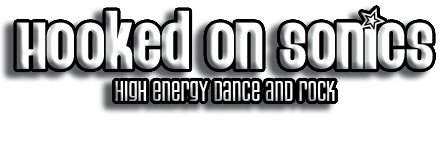
<style>
.page{position:relative;width:446px;height:144px;background:#ffffff}
.page>*{position:absolute;margin:0}
.t1{font:65px "EightTrack"}
.t2{font:30px "HouseGothicLightAltCaps"}
</style>
<div class="page">
<p class="t1" style="left:16px;top:8px;width:417px;height:61px">Hooked On Sonics</p>
<p class="t2" style="left:115px;top:81px;width:220px;height:20px">High energy dance and rock</p>
</div>
